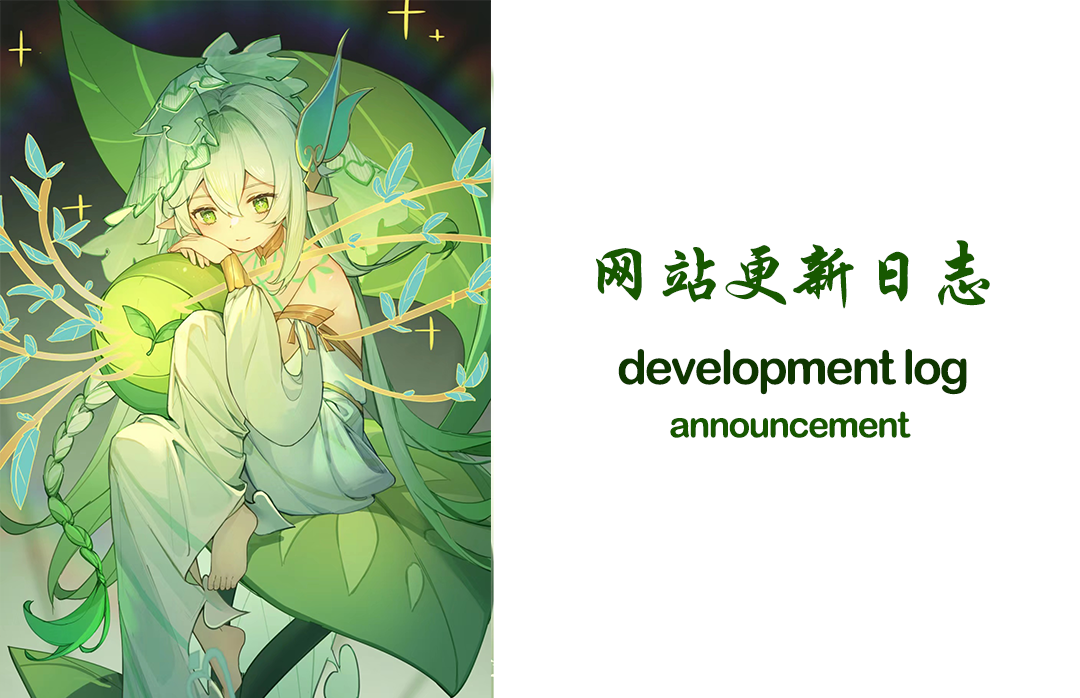
<style>
.page{position:relative;width:1080px;height:698px;background:#ffffff}
.page>*{position:absolute;margin:0}
.t1{font:72px "STXingkai";letter-spacing:-0.05em;color:#175800}
.t2{font:48px "ArialRoundedMTBold";letter-spacing:-0.05em;color:#0e3600}
.t3{font:36px "ArialRoundedMTBold";letter-spacing:-0.05em;color:#175800}
</style>
<div class="page">
<p class="t1" style="left:596px;top:240px;width:394px;height:69px">网站更新日志</p>
<p class="t2" style="left:618px;top:348px;width:349px;height:47px">development log</p>
<p class="t3" style="left:670px;top:411px;width:241px;height:27px">announcement</p>
</div>
